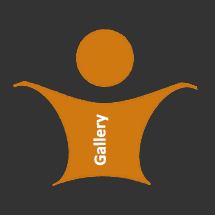
<style>
.page{position:relative;width:215px;height:215px;background:#333333}
.page>*{position:absolute;margin:0}
.t1{font:17.3px "Calibri-Bold";color:#ffffff}
</style>
<div class="page">
<p class="t1" style="left:93px;top:114px;width:16px;height:52px;rotate:-91deg">Gallery</p>
</div>
